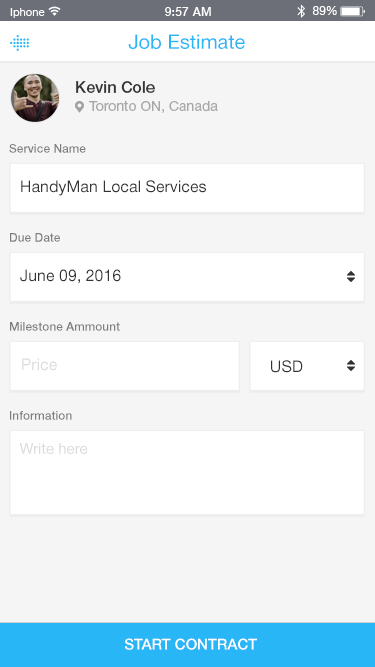
<style>
.page{position:relative;width:375px;height:667px;background:#f5f5f5}
.page>*{position:absolute;margin:0}
.t1{font:20px "HelveticaNeueCyr-Roman";color:#29b6f6}
.t2{font:16px "HelveticaNeueCyr-Medium";color:#343433}
.t3{font:14px "HelveticaNeueCyr-Roman";color:#a8a8a8}
.t4{font:12px "HelveticaNeueCyr-Medium";color:#7d7d7d}
.t5{font:16px "HelveticaNeueCyr-Roman";color:#343433}
.t6{font:16px "HelveticaNeueCyr-Roman";color:#dbdbdb}
.t7{font:15px "HelveticaNeueCyr-Roman";color:#dbdbdb}
.t8{font:15px "HelveticaNeueCyr-Medium";color:#ffffff}
</style>
<div class="page">
<p class="t1" style="left:128px;top:34px;width:117px;height:15px">Job Estimate</p>
<p class="t2" style="left:76px;top:81px;width:79px;height:12px">Kevin Cole</p>
<p class="t3" style="left:89px;top:100px;width:129px;height:13px">Toronto ON, Canada</p>
<p class="t4" style="left:9px;top:144px;width:77px;height:9px">Service Name</p>
<p class="t5" style="left:21px;top:180px;width:185px;height:16px">HandyMan Local Services</p>
<p class="t4" style="left:10px;top:233px;width:50px;height:9px">Due Date</p>
<p class="t5" style="left:20px;top:269px;width:101px;height:15px">June 09, 2016</p>
<p class="t4" style="left:10px;top:322px;width:110px;height:9px">Milestone Ammount</p>
<p class="t6" style="left:22px;top:358px;width:35px;height:13px">Price</p>
<p class="t5" style="left:271px;top:360px;width:32px;height:13px">USD</p>
<p class="t4" style="left:10px;top:411px;width:62px;height:9px">Information</p>
<p class="t7" style="left:19px;top:443px;width:69px;height:11px">Write here</p>
<p class="t8" style="left:125px;top:638px;width:132px;height:12px">START CONTRACT</p>
</div>
